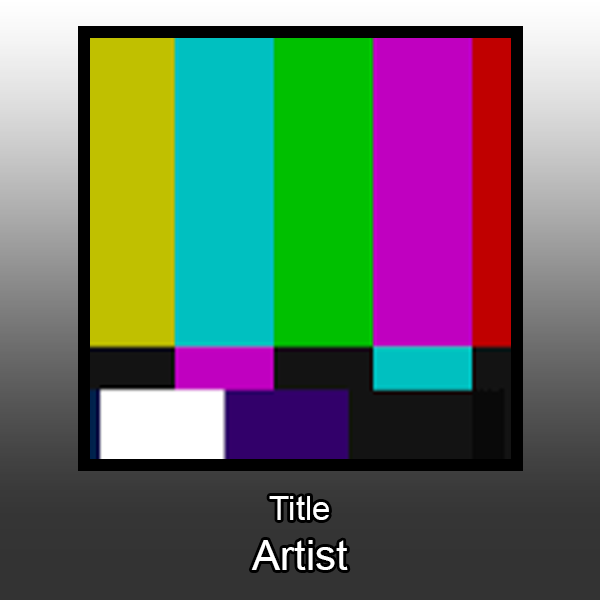
<style>
.page{position:relative;width:600px;height:600px}
.page>*{position:absolute;margin:0}
.t1{font:41.7px "ArialMT";color:#ffffff}
.t2{font:33.3px "ArialMT";color:#ffffff}
</style>
<div class="page">
<p class="t1" style="left:251px;top:496px;width:97px;height:74px;text-align:center"><span class="t2">Title<br></span>Artist</p>
</div>
